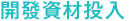
<style>
.page{position:relative;width:129px;height:21px;background:#ffffff}
.page>*{position:absolute;margin:0}
.t1{font:20px "GothicMB101Pro-Medium";letter-spacing:0.05em;color:#1dbcc0}
</style>
<div class="page">
<p class="t1" style="left:1px;top:0px;width:124px;height:20px">開發資材投入</p>
</div>
